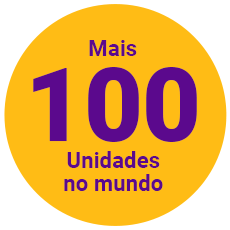
<style>
.page{position:relative;width:230px;height:230px;background:#ffbc15}
.page>*{position:absolute;margin:0}
.t1{font:22.4px "Roboto-Bold";color:#5b098d}
.t2{font:101.6px "Roboto-Black";color:#5b098d}
.t3{font:22.4px/22.4px "Roboto-Bold";color:#5b098d}
</style>
<div class="page">
<p class="t1" style="left:89px;top:40px;width:48px;height:16px">Mais</p>
<p class="t2" style="left:33px;top:67px;width:164px;height:75px">100</p>
<p class="t3" style="left:64px;top:151px;width:99px;height:40px;text-align:center">Unidades<br>no mundo</p>
</div>
